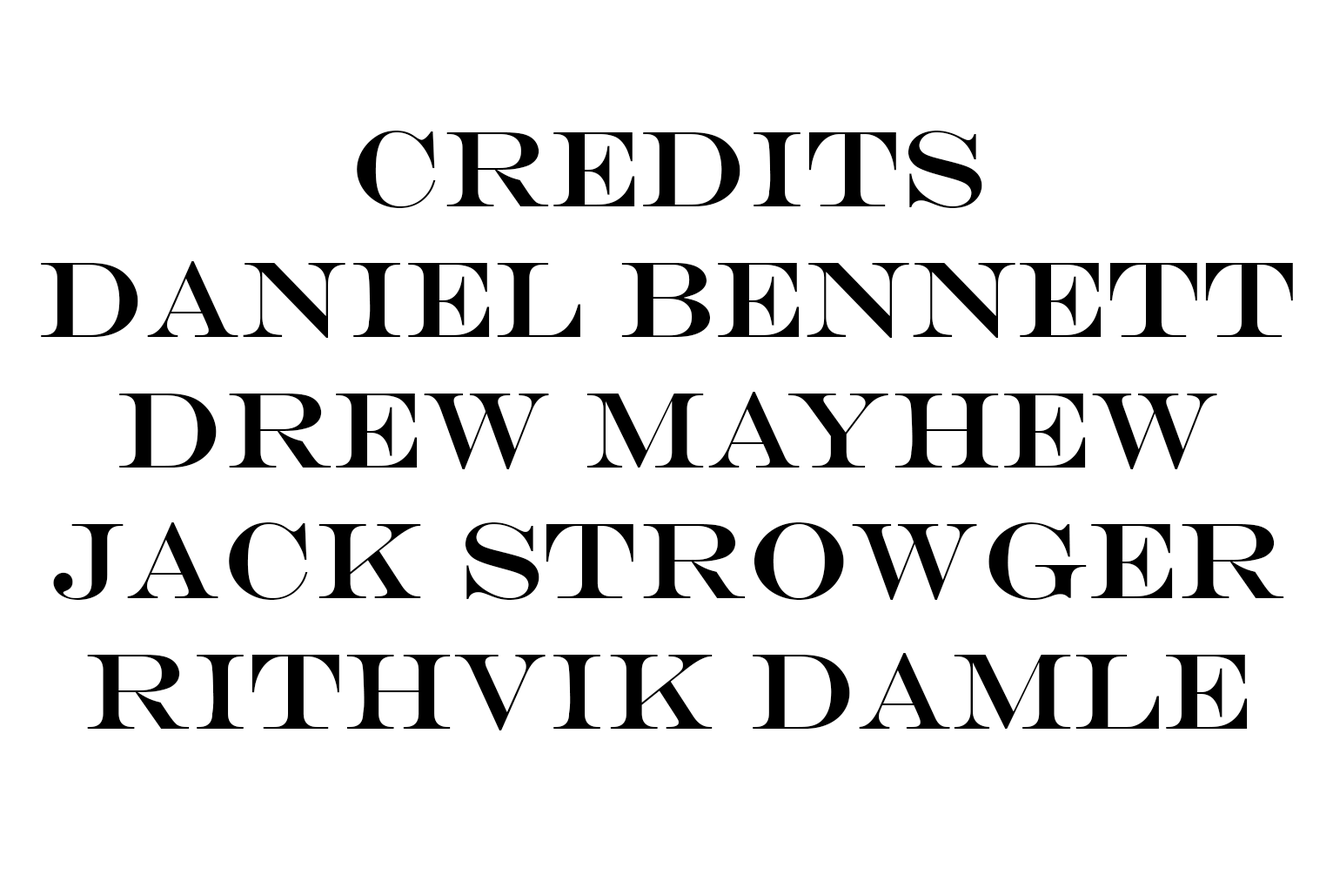
<style>
.page{position:relative;width:1333px;height:895px;background:#ffffff}
.page>*{position:absolute;margin:0}
.t1{font:108.8px "EngraversMT";color:#000000}
</style>
<div class="page">
<p class="t1" style="left:41px;top:131px;width:1252px;height:599px;text-align:center">Credits<br>Daniel Bennett<br>Drew Mayhew<br>Jack Strowger<br>Rithvik Damle</p>
</div>
